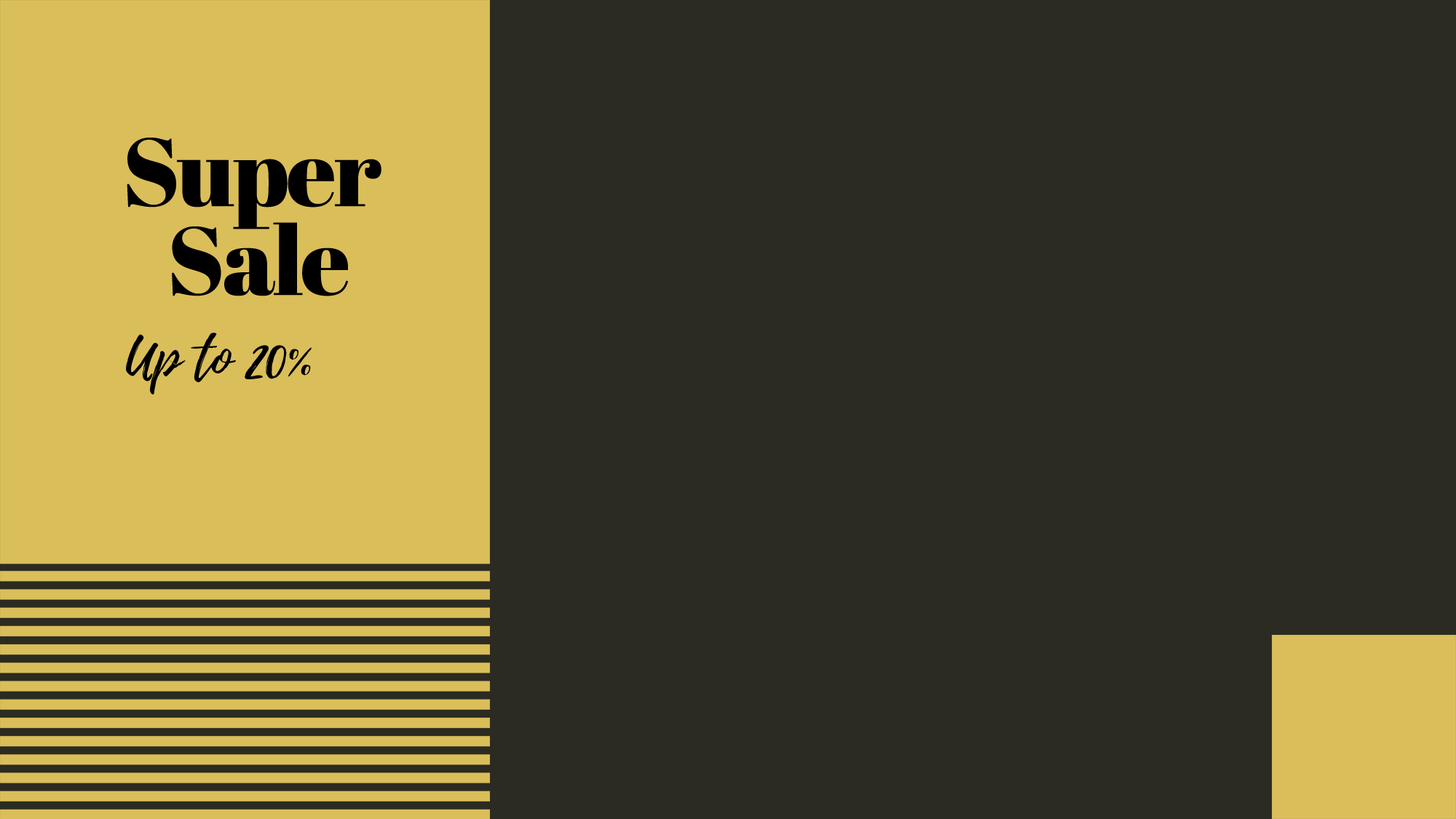
<style>
.page{position:relative;width:1456px;height:819px;background:#2c2b21}
.page>*{position:absolute;margin:0}
.t1{font:96.2px/88.8px "AbrilFatface-Regular";letter-spacing:-0.025em;color:#000000}
.t2{font:52.4px "Playlist-Script";letter-spacing:-0.005em;color:#000000}
</style>
<div class="page">
<p class="t1" style="left:127px;top:138px;width:254px;height:158px">Super<br>   Sale</p>
<p class="t2" style="left:126px;top:333px;width:186px;height:62px">Up to 20%</p>
</div>
